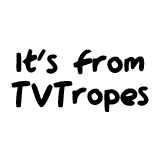
<style>
.page{position:relative;width:160px;height:160px;background:#ffffff}
.page>*{position:absolute;margin:0}
.t1{font:35.9px/31.9px "QAReports";color:#000000}
</style>
<div class="page">
<p class="t1" style="left:11px;top:49px;width:138px;height:63px;text-align:center">It's from<br>TVTropes</p>
</div>
